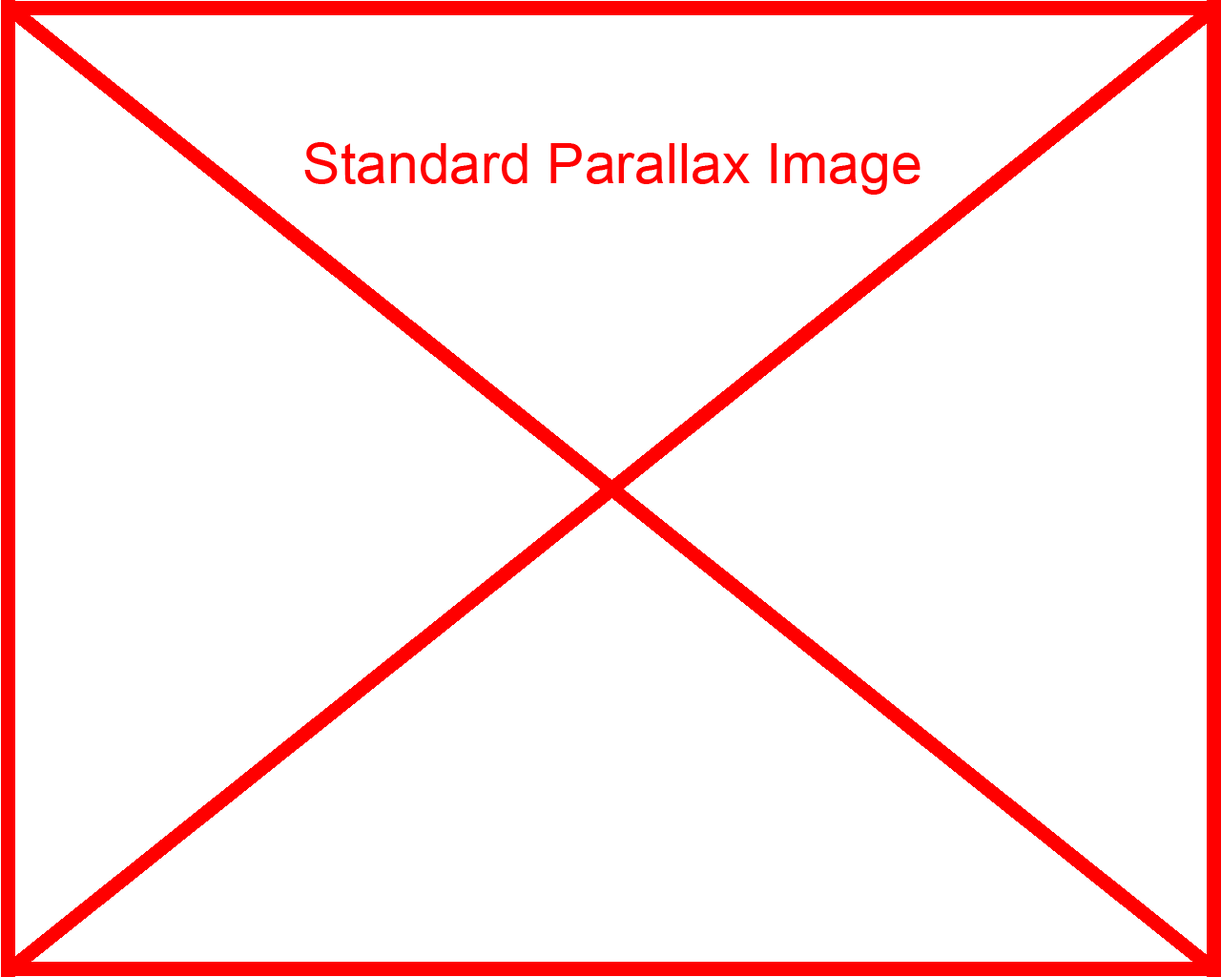
<style>
.page{position:relative;width:1221px;height:977px;background:#ffffff}
.page>*{position:absolute;margin:0}
.t1{font:56.3px "ArialMT";color:#ff0000}
</style>
<div class="page">
<p class="t1" style="left:304px;top:142px;width:616px;height:53px">Standard Parallax Image</p>
</div>
